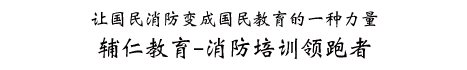
<style>
.page{position:relative;width:467px;height:70px;background:#ffffff}
.page>*{position:absolute;margin:0}
.t1{font:18px/26px "WeibeiSC-Bold";color:#040000;text-transform:uppercase}
.t2{font:24px/26px "WeibeiSC-Bold";color:#040000;text-transform:uppercase}
</style>
<div class="page">
<p class="t1" style="left:91px;top:10px;width:287px;height:50px;text-align:center">让国民消防变成国民教育的一种力量<br><span class="t2">辅仁教育-消防培训领跑者</span></p>
</div>
